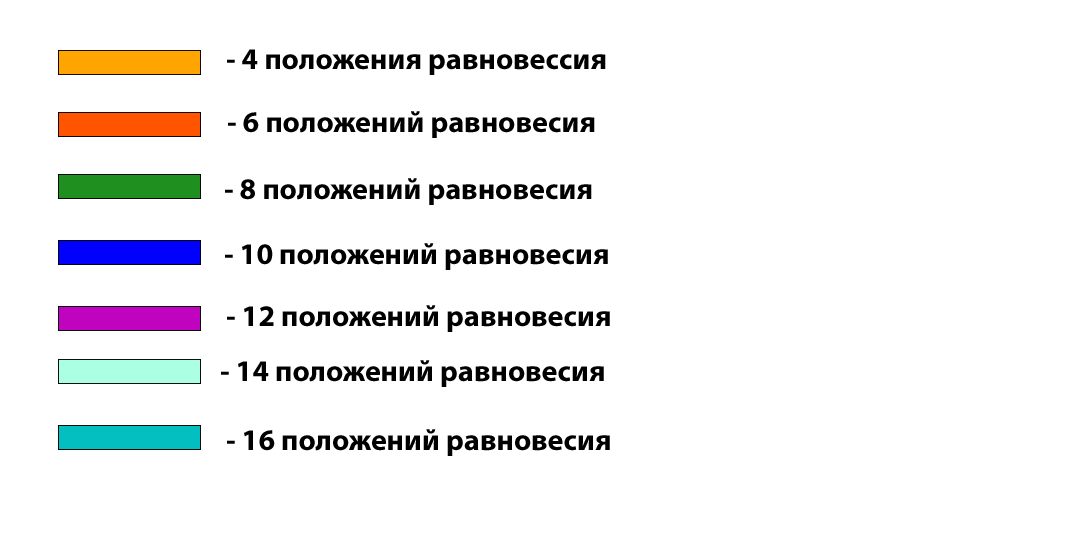
<style>
.page{position:relative;width:1090px;height:545px;background:#ffffff}
.page>*{position:absolute;margin:0}
.t1{font:30px "MyriadPro-Bold";color:#000000}
</style>
<div class="page">
<p class="t1" style="left:227px;top:49px;width:379px;height:26px">- 4 положения равновессия</p>
<p class="t1" style="left:228px;top:111px;width:367px;height:27px">- 6 положений равновесия</p>
<p class="t1" style="left:225px;top:178px;width:367px;height:27px">- 8 положений равновесия</p>
<p class="t1" style="left:225px;top:243px;width:383px;height:27px">- 10 положений равновесия</p>
<p class="t1" style="left:227px;top:305px;width:383px;height:27px">- 12 положений равновесия</p>
<p class="t1" style="left:221px;top:360px;width:383px;height:27px">- 14 положений равновесия</p>
<p class="t1" style="left:227px;top:429px;width:383px;height:27px">- 16 положений равновесия</p>
</div>
